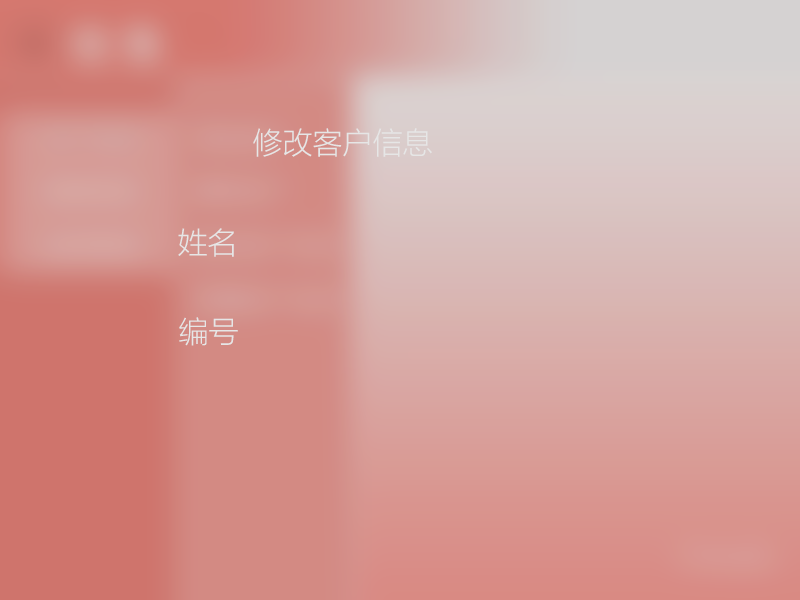
<style>
.page{position:relative;width:800px;height:600px}
.page>*{position:absolute;margin:0}
.t1{font:30px "MicrosoftYaHeiLight";color:#e6e6e6}
</style>
<div class="page">
<p class="t1" style="left:253px;top:128px;width:179px;height:29px">修改客户信息</p>
<p class="t1" style="left:178px;top:228px;width:56px;height:29px">姓名</p>
<p class="t1" style="left:179px;top:317px;width:59px;height:29px">编号</p>
</div>
